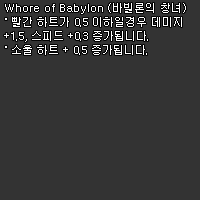
<style>
.page{position:relative;width:200px;height:200px;background:#333333}
.page>*{position:absolute;margin:0}
.t1{font:11px/14px "Dotum";color:#ffffff}
</style>
<div class="page">
<p class="t1" style="left:4px;top:3px;width:182px;height:52px">Whore of Babylon (바빌론의 창녀)<br>˚ 빨간 하트가 0.5 이하일경우 데미지<br>+1.5, 스피드 +0.3 증가됩니다.<br>˚ 소울 하트 + 0.5 증가됩니다.</p>
</div>
